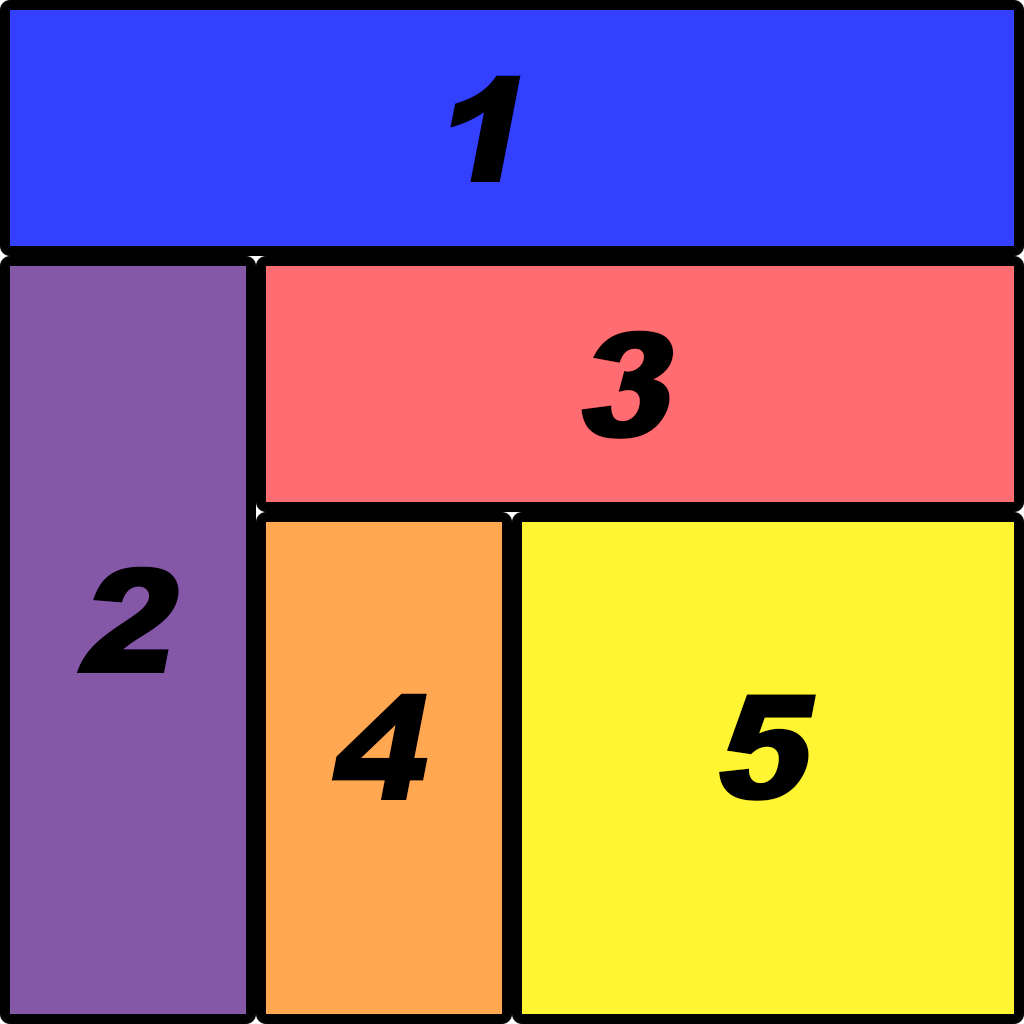
<style>
.page{position:relative;width:1024px;height:1024px;background:#fff533}
.page>*{position:absolute;margin:0}
.t1{font:146.4px "Arial-Black";color:#000000;font-style:italic}
</style>
<div class="page">
<p class="t1" style="left:450px;top:75px;width:71px;height:107px">1</p>
<p class="t1" style="left:581px;top:330px;width:93px;height:109px">3</p>
<p class="t1" style="left:76px;top:566px;width:103px;height:107px">2</p>
<p class="t1" style="left:331px;top:693px;width:97px;height:107px">4</p>
<p class="t1" style="left:719px;top:694px;width:97px;height:107px">5</p>
</div>
